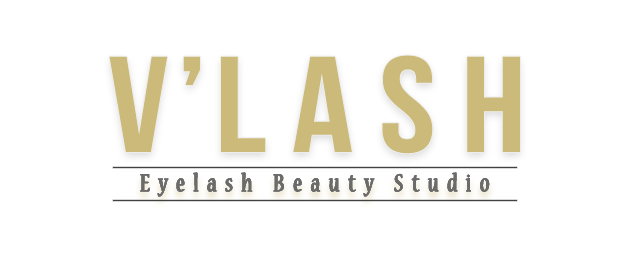
<style>
.page{position:relative;width:630px;height:260px;background:#ffffff}
.page>*{position:absolute;margin:0}
.t1{font:136px "BebasNeue";letter-spacing:0.17em;color:#cbba79;scale:1.11 1}
.t2{font:136px "BebasNeue";letter-spacing:0.06em;color:#cbba79;scale:1.11 1}
.t3{font:26.7px "NuevaStd-Cond";letter-spacing:0.3em;color:#6b6b6b;font-weight:bold}
</style>
<div class="page">
<p class="t1" style="left:109px;top:55px;width:411px;height:99px"><span class="t2">V’</span>LASH</p>
<p class="t3" style="left:140px;top:172px;width:350px;height:25px">Eyelash Beauty Studio</p>
<p class="t3" style="left:140px;top:172px;width:350px;height:25px">Eyelash Beauty Studio</p>
<p class="t3" style="left:140px;top:172px;width:350px;height:25px">Eyelash Beauty Studio</p>
</div>
